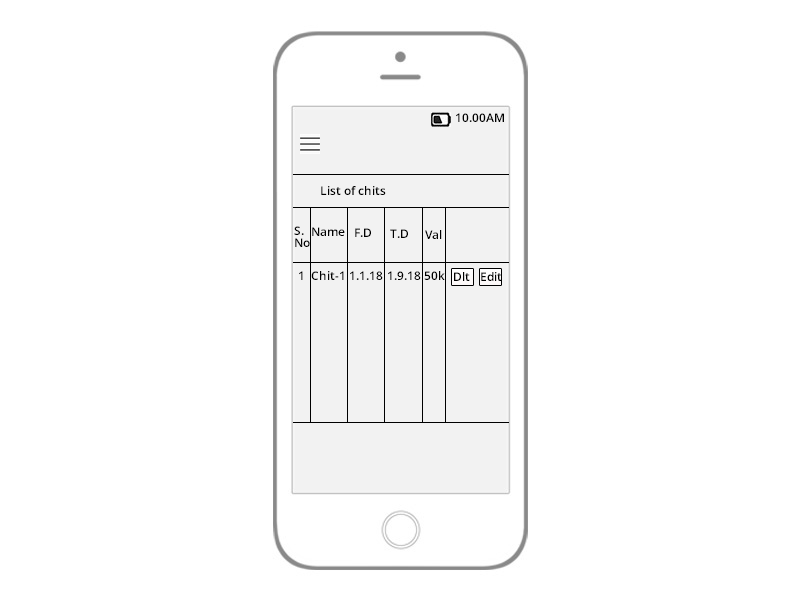
<style>
.page{position:relative;width:800px;height:600px;background:#ffffff}
.page>*{position:absolute;margin:0}
.t1{font:12px "OpenSans-Semibold";color:#000000}
.t2{font:12px/6px "OpenSans-Semibold";color:#000000}
</style>
<div class="page">
<p class="t1" style="left:456px;top:113px;width:48px;height:9px">10.00AM</p>
<p class="t1" style="left:321px;top:186px;width:65px;height:9px">List of chits</p>
<p class="t2" style="left:294px;top:226px;width:16px;height:21px">S.<br><br>No</p>
<p class="t1" style="left:312px;top:227px;width:33px;height:9px">Name</p>
<p class="t1" style="left:355px;top:228px;width:16px;height:9px">F.D</p>
<p class="t1" style="left:390px;top:229px;width:18px;height:9px">T.D</p>
<p class="t1" style="left:425px;top:230px;width:17px;height:9px">Val</p>
<p class="t1" style="left:299px;top:271px;width:4px;height:9px">1</p>
<p class="t1" style="left:311px;top:271px;width:33px;height:9px">Chit-1</p>
<p class="t1" style="left:350px;top:271px;width:33px;height:9px">1.1.18</p>
<p class="t1" style="left:388px;top:271px;width:33px;height:9px">1.9.18</p>
<p class="t1" style="left:424px;top:271px;width:21px;height:9px">50k</p>
<p class="t1" style="left:454px;top:272px;width:16px;height:9px">Dlt</p>
<p class="t1" style="left:481px;top:272px;width:21px;height:9px">Edit</p>
</div>
